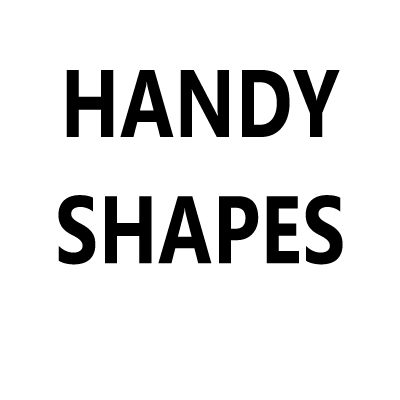
<style>
.page{position:relative;width:400px;height:400px;background:#ffffff}
.page>*{position:absolute;margin:0}
.t1{font:95.8px/126.4px "Ebrima-Bold";letter-spacing:0.01em;color:#000000;scale:0.8 1}
</style>
<div class="page">
<p class="t1" style="left:58px;top:70px;width:285px;height:195px;text-align:center">HANDY<br>SHAPES</p>
</div>
